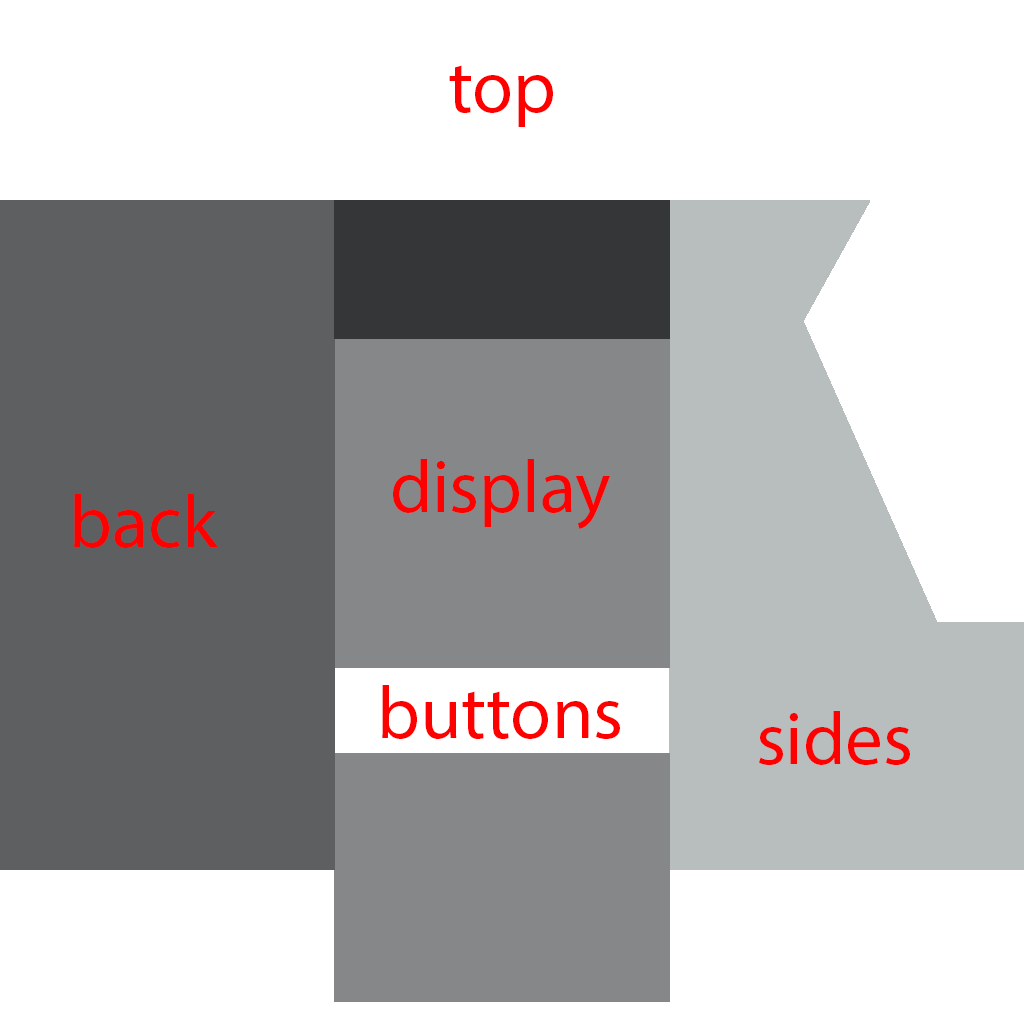
<style>
.page{position:relative;width:1024px;height:1024px;background:#ffffff}
.page>*{position:absolute;margin:0}
.t1{font:75px "MyriadPro-Regular";color:#ff0000}
</style>
<div class="page">
<p class="t1" style="left:449px;top:65px;width:104px;height:62px">top</p>
<p class="t1" style="left:393px;top:459px;width:217px;height:70px">display</p>
<p class="t1" style="left:74px;top:494px;width:144px;height:54px">back</p>
<p class="t1" style="left:382px;top:685px;width:238px;height:54px">buttons</p>
<p class="t1" style="left:759px;top:711px;width:151px;height:54px">sides</p>
</div>
